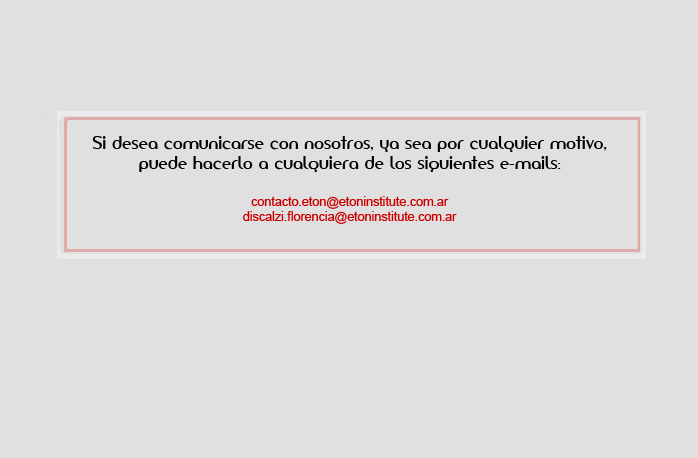
<style>
.page{position:relative;width:698px;height:458px;background:#e0e0e0}
.page>*{position:absolute;margin:0}
.t1{font:16.7px "AmerikaSans";color:#000000}
.t2{font:12.5px "ArialMT";color:#cd0000}
</style>
<div class="page">
<p class="t1" style="left:92px;top:136px;width:515px;height:88px;text-align:center">Si desea comunicarse con nosotros, ya sea por cualquier motivo, puede hacerlo a cualquiera de los siguientes e-mails:<br><br><span class="t2">contacto.eton@etoninstitute.com.ar<br>discalzi.florencia@etoninstitute.com.ar</span></p>
</div>
